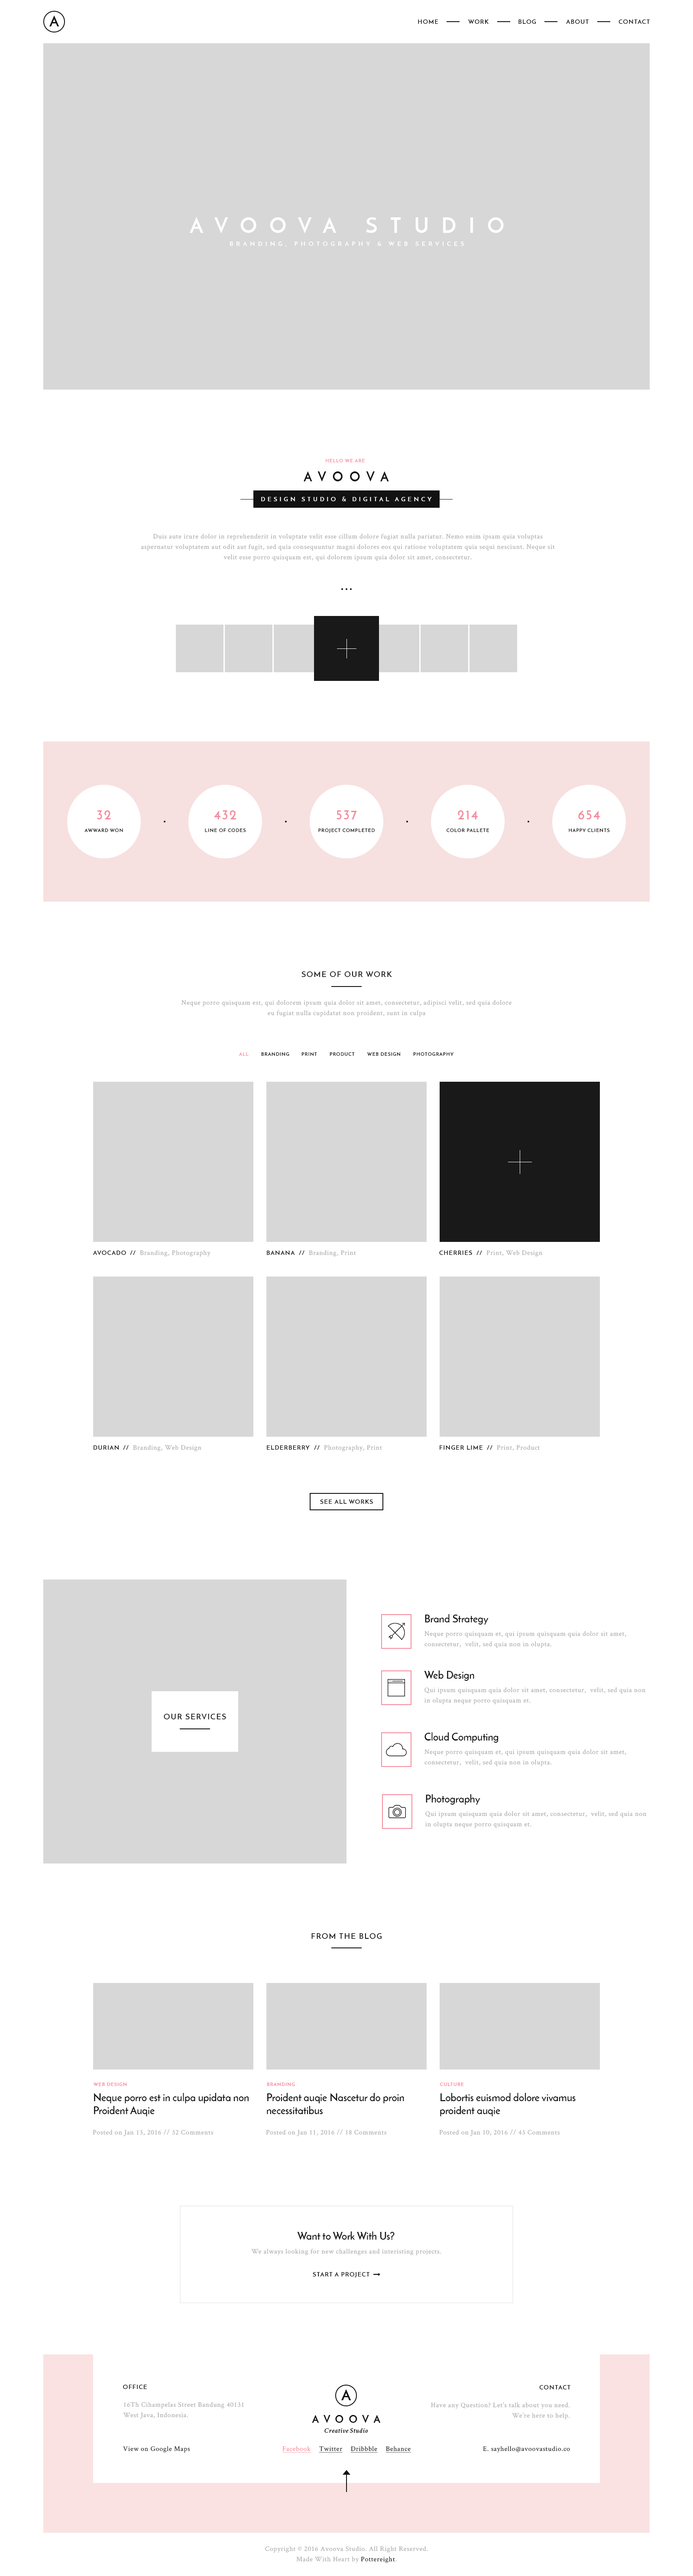
<style>
.page{position:relative;width:693px;height:2576px;background:#ffffff}
.page>*{position:absolute;margin:0}
.t1{font:14.7px "JosefinSans-Bold";letter-spacing:0.5em;color:#121212;text-transform:uppercase}
.t2{font:6.1px "JosefinSans-SemiBold";letter-spacing:0.1em;color:#121212;text-transform:uppercase}
.t3{font:20.8px "JosefinSans-Bold";letter-spacing:0.6em;color:#ffffff;text-transform:uppercase}
.t4{font:20.8px "JosefinSans-Bold";letter-spacing:0.5em;color:#121212;text-transform:uppercase}
.t5{font:6.1px "JosefinSans-Bold";letter-spacing:0.5em;color:#ffffff;text-transform:uppercase}
.t6{font:4.8px "JosefinSans-SemiBold";letter-spacing:0.1em;color:#f68c9d;text-transform:uppercase}
.t7{font:13px "JosefinSans-Bold";letter-spacing:0.5em;color:#121212;text-transform:uppercase}
.t8{font:6.1px "JosefinSans-SemiBold";letter-spacing:0.4em;color:#ffffff;text-transform:uppercase}
.t9{font:6.9px/10.4px "CrimsonText-Roman";letter-spacing:0.05em;color:#ababab}
.t10{font:13px "JosefinSans-Bold";letter-spacing:0.1em;color:#f68c9d;text-transform:uppercase}
.t11{font:4.8px "JosefinSans-SemiBold";letter-spacing:0.1em;color:#121212;text-transform:uppercase}
.t12{font:7.8px "JosefinSans-SemiBold";letter-spacing:0.1em;color:#121212;text-transform:uppercase}
.t13{font:6.9px "CrimsonText-Roman";letter-spacing:0.05em;color:#ababab}
.t14{font:10.4px "JosefinSans-SemiBold";color:#121212}
.t15{font:4.8px "JosefinSans-Bold";letter-spacing:0.1em;color:#f68c9d;text-transform:uppercase}
.t16{font:10.4px/13px "JosefinSans-SemiBold";color:#121212}
.t17{font:6.9px "CrimsonText-Roman";letter-spacing:0.05em;color:#121212}
.t18{font:6.9px "CrimsonText-Roman";letter-spacing:0.05em;color:#f68c9d;text-decoration:underline}
.t19{font:6.9px "CrimsonText-Roman";letter-spacing:0.05em;color:#121212;text-decoration:underline}
.t20{font:6.9px/10.4px "CrimsonText-Roman";letter-spacing:0.05em;color:#121212}
</style>
<div class="page">
<p class="t1" style="left:49px;top:15px;width:10px;height:11px">a</p>
<p class="t2" style="left:418px;top:19px;width:20px;height:5px">Home</p>
<p class="t2" style="left:468px;top:19px;width:20px;height:5px">Work</p>
<p class="t2" style="left:518px;top:19px;width:17px;height:5px">Blog</p>
<p class="t2" style="left:566px;top:19px;width:22px;height:5px">About</p>
<p class="t2" style="left:618px;top:19px;width:31px;height:5px">Contact</p>
<p class="t3" style="left:190px;top:217px;width:313px;height:17px"><span class="t4"> </span>Avoova Studio</p>
<p class="t5" style="left:230px;top:241px;width:234px;height:6px">Branding, Photography &amp; Web Services</p>
<p class="t6" style="left:326px;top:459px;width:38px;height:4px">Hello We Are</p>
<p class="t7" style="left:303px;top:471px;width:86px;height:11px">Avoova</p>
<p class="t8" style="left:261px;top:497px;width:171px;height:5px">Design Studio &amp; Digital agency</p>
<p class="t9" style="left:141px;top:534px;width:414px;height:27px;text-align:center">Duis aute irure dolor in reprehenderit in voluptate velit esse cillum dolore fugiat nulla pariatur. Nemo enim ipsam quia voluptas aspernatur voluptatem aut odit aut fugit, sed quia consequuntur magni dolores eos qui ratione voluptatem quia sequi nesciunt. Neque sit velit esse porro quisquam est, qui dolorem ipsum quia dolor sit amet, consectetur.</p>
<p class="t10" style="left:97px;top:810px;width:14px;height:9px">32</p>
<p class="t10" style="left:213px;top:810px;width:23px;height:9px">432</p>
<p class="t10" style="left:336px;top:810px;width:21px;height:9px">537</p>
<p class="t10" style="left:458px;top:810px;width:19px;height:9px">214</p>
<p class="t10" style="left:578px;top:810px;width:22px;height:9px">654</p>
<p class="t11" style="left:84px;top:828px;width:39px;height:4px">Awward Won</p>
<p class="t11" style="left:205px;top:828px;width:41px;height:4px">Line Of Codes</p>
<p class="t11" style="left:318px;top:828px;width:56px;height:5px">Project Completed</p>
<p class="t11" style="left:446px;top:829px;width:43px;height:3px">Color pallete</p>
<p class="t11" style="left:568px;top:828px;width:41px;height:4px">Happy Clients</p>
<p class="t12" style="left:301px;top:971px;width:91px;height:6px">Some Of Our Work</p>
<p class="t9" style="left:181px;top:1000px;width:330px;height:17px;text-align:center">Neque porro quisquam est, qui dolorem ipsum quia dolor sit amet, consectetur, adipisci velit, sed quia dolore eu fugiat nulla cupidatat non proident, sunt in culpa</p>
<p class="t6" style="left:239px;top:1052px;width:9px;height:4px">All</p>
<p class="t11" style="left:261px;top:1052px;width:28px;height:4px">Branding</p>
<p class="t11" style="left:301px;top:1052px;width:16px;height:4px">Print</p>
<p class="t11" style="left:329px;top:1052px;width:26px;height:4px">Product</p>
<p class="t11" style="left:367px;top:1052px;width:33px;height:4px">Web Design</p>
<p class="t11" style="left:413px;top:1052px;width:40px;height:4px">Photography</p>
<p class="t2" style="left:93px;top:1251px;width:33px;height:4px">Avocado</p>
<p class="t2" style="left:130px;top:1251px;width:5px;height:4px">//</p>
<p class="t13" style="left:140px;top:1250px;width:70px;height:7px">Branding, Photography</p>
<p class="t2" style="left:267px;top:1250px;width:28px;height:5px">Banana</p>
<p class="t2" style="left:299px;top:1251px;width:5px;height:4px">//</p>
<p class="t13" style="left:309px;top:1250px;width:47px;height:7px">Branding, Print</p>
<p class="t2" style="left:439px;top:1251px;width:33px;height:4px">Cherries</p>
<p class="t2" style="left:476px;top:1251px;width:6px;height:4px">//</p>
<p class="t13" style="left:486px;top:1250px;width:56px;height:7px">Print, Web Design</p>
<p class="t2" style="left:93px;top:1445px;width:26px;height:5px">Durian</p>
<p class="t2" style="left:123px;top:1445px;width:6px;height:5px">//</p>
<p class="t13" style="left:133px;top:1445px;width:68px;height:6px">Branding, Web Design</p>
<p class="t2" style="left:267px;top:1445px;width:43px;height:5px">Elderberry</p>
<p class="t2" style="left:314px;top:1445px;width:5px;height:5px">//</p>
<p class="t13" style="left:324px;top:1445px;width:58px;height:6px">Photography, Print</p>
<p class="t2" style="left:439px;top:1445px;width:44px;height:5px">Finger Lime</p>
<p class="t2" style="left:487px;top:1445px;width:5px;height:5px">//</p>
<p class="t13" style="left:497px;top:1445px;width:43px;height:6px">Print, Product</p>
<p class="t2" style="left:320px;top:1499px;width:53px;height:5px">See All Works</p>
<p class="t14" style="left:425px;top:1614px;width:63px;height:11px">Brand Strategy</p>
<p class="t9" style="left:424px;top:1631px;width:202px;height:17px">Neque porro quisquam et, qui ipsum quisquam quia dolor sit amet, consectetur,  velit, sed quia non in olupta.</p>
<p class="t14" style="left:424px;top:1670px;width:50px;height:11px">Web Design</p>
<p class="t9" style="left:424px;top:1687px;width:221px;height:17px">Qui ipsum quisquam quia dolor sit amet, consectetur,  velit, sed quia non in olupta neque porro quisquam et.</p>
<p class="t12" style="left:164px;top:1714px;width:62px;height:6px">Our Services</p>
<p class="t14" style="left:424px;top:1732px;width:74px;height:11px">Cloud Computing</p>
<p class="t9" style="left:424px;top:1749px;width:202px;height:17px">Neque porro quisquam et, qui ipsum quisquam quia dolor sit amet, consectetur,  velit, sed quia non in olupta.</p>
<p class="t14" style="left:426px;top:1794px;width:54px;height:11px">Photography</p>
<p class="t9" style="left:425px;top:1811px;width:221px;height:17px">Qui ipsum quisquam quia dolor sit amet, consectetur,  velit, sed quia non in olupta neque porro quisquam et.</p>
<p class="t12" style="left:311px;top:1933px;width:70px;height:6px">From The Blog</p>
<p class="t15" style="left:93px;top:2082px;width:34px;height:4px">Web Design</p>
<p class="t16" style="left:94px;top:2093px;width:154px;height:23px">Neque porro est in culpa upidata non Proident Auqie</p>
<p class="t16" style="left:267px;top:2093px;width:137px;height:21px">Proident auqie Nascetur do proin necessitatibus</p>
<p class="t15" style="left:267px;top:2082px;width:28px;height:4px">Branding</p>
<p class="t16" style="left:440px;top:2093px;width:135px;height:23px">Lobortis euismod dolore vivamus proident auqie</p>
<p class="t15" style="left:440px;top:2083px;width:24px;height:3px">Culture</p>
<p class="t13" style="left:93px;top:2129px;width:120px;height:7px">Posted on Jan 13, 2016 // 32 Comments</p>
<p class="t13" style="left:266px;top:2129px;width:120px;height:7px">Posted on Jan 11, 2016 // 18 Comments</p>
<p class="t13" style="left:439px;top:2129px;width:120px;height:7px">Posted on Jan 10, 2016 // 43 Comments</p>
<p class="t14" style="left:297px;top:2231px;width:97px;height:9px">Want to Work With Us?</p>
<p class="t13" style="left:251px;top:2249px;width:190px;height:6px">We always looking for new challenges and interisting projects.</p>
<p class="t2" style="left:313px;top:2272px;width:56px;height:5px">Start A Project</p>
<p class="t2" style="left:123px;top:2385px;width:24px;height:4px">Office</p>
<p class="t2" style="left:539px;top:2385px;width:31px;height:5px">Contact</p>
<p class="t9" style="left:123px;top:2402px;width:121px;height:17px">16Th Cihampelas Street Bandung 40131<br>West Java, Indonesia.</p>
<p class="t9" style="left:431px;top:2402px;width:139px;height:17px;text-align:right">Have any Question? Let’s talk about you need.<br>We’re here to help.</p>
<p class="t17" style="left:123px;top:2446px;width:67px;height:7px">View on Google Maps</p>
<p class="t18" style="left:282px;top:2446px;width:29px;height:7px">Facebook</p>
<p class="t19" style="left:319px;top:2446px;width:23px;height:7px">Twitter</p>
<p class="t19" style="left:350px;top:2446px;width:27px;height:7px">Dribbble</p>
<p class="t19" style="left:385px;top:2446px;width:26px;height:7px">Behance</p>
<p class="t17" style="left:483px;top:2446px;width:87px;height:7px">E. sayhello@avoovastudio.co</p>
<p class="t9" style="left:265px;top:2546px;width:163px;height:17px;text-align:center">Copyright © 2016 Avoova Studio. All Right Reserved.<br>Made With Heart by <span class="t20">Pottereight</span>.</p>
</div>
